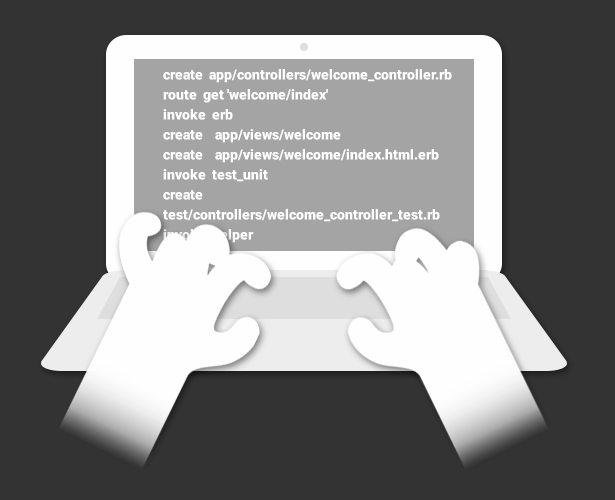
<style>
.page{position:relative;width:615px;height:500px;background:#333333}
.page>*{position:absolute;margin:0}
.t1{font:14px/20px "Roboto-Black";color:#fefefe}
</style>
<div class="page">
<p class="t1" style="left:163px;top:69px;width:289px;height:174px">create  app/controllers/welcome_controller.rb<br>route  get 'welcome/index'<br>invoke  erb<br>create    app/views/welcome<br>create    app/views/welcome/index.html.erb<br>invoke  test_unit<br>create    test/controllers/welcome_controller_test.rb<br>invoke  helper<br>create    app/helpers/welcome_helper.rb<br>invoke    test_unit<br>create      test/helpers/welcome_helper_test.rb<br>invoke  assets<br>invoke    coffee<br>create      app/assets/javascripts/welcome.js.coffee<br>invoke    scss<br>create      app/assets/stylesheets/welcome.css.scss</p>
</div>
